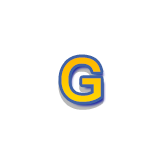
<style>
.page{position:relative;width:164px;height:164px;background:#ffffff}
.page>*{position:absolute;margin:0}
.t1{font:59.8px "PingFangHK-Semibold";color:#ffc700;text-transform:uppercase}
</style>
<div class="page">
<p class="t1" style="left:61px;top:57px;width:40px;height:45px">g</p>
</div>
